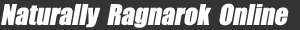
<style>
.page{position:relative;width:300px;height:30px;background:#333333}
.page>*{position:absolute;margin:0}
.t1{font:26px "Impact";color:#ffffff;font-style:italic}
</style>
<div class="page">
<p class="t1" style="left:1px;top:3px;width:288px;height:25px">Naturally  Ragnarok  Online</p>
</div>
